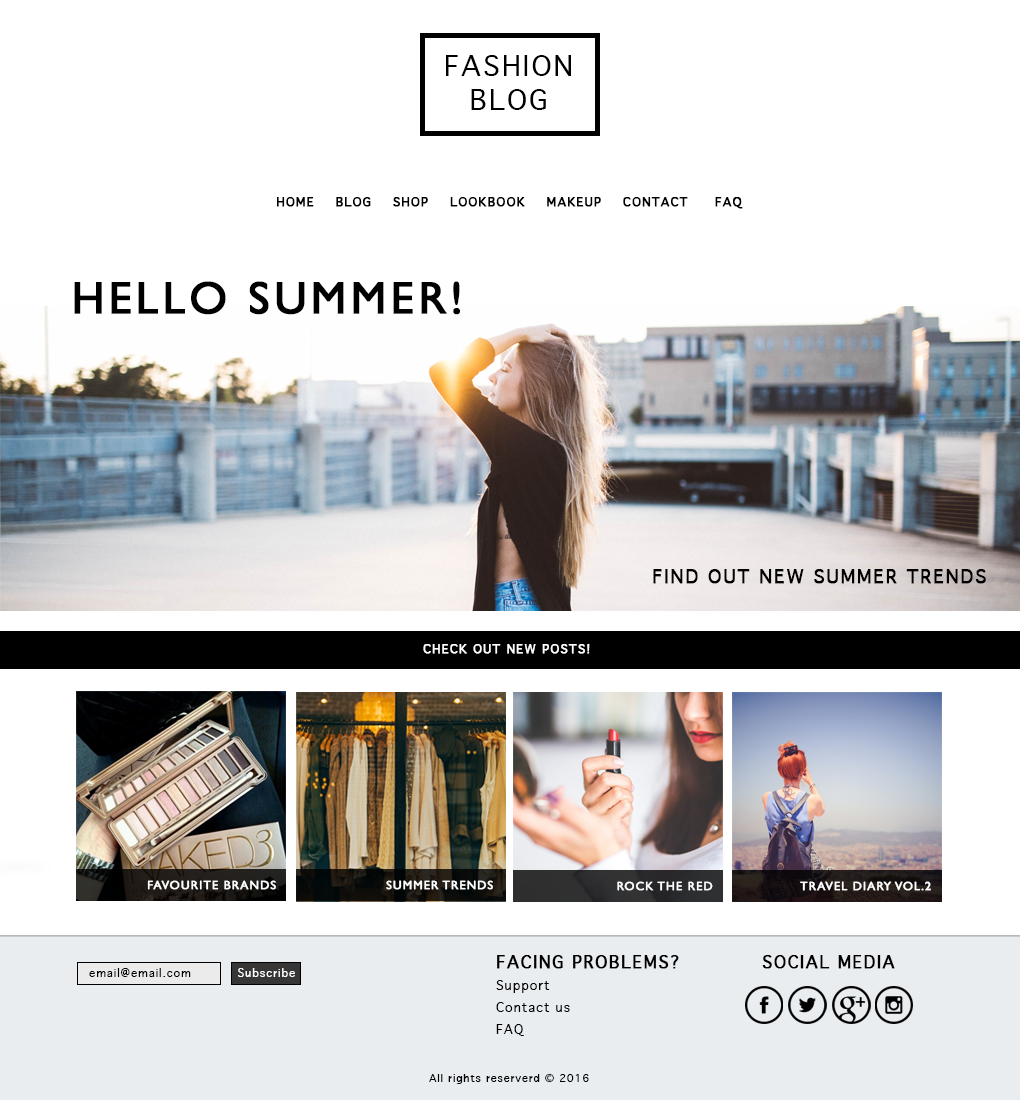
<style>
.page{position:relative;width:1020px;height:1100px;background:#ffffff}
.page>*{position:absolute;margin:0}
.t1{font:26.9px/34.8px "Geneva";letter-spacing:0.075em;color:#000000;text-transform:uppercase}
.t2{font:12px "Geneva";letter-spacing:0.075em;color:#000000;text-transform:uppercase;font-weight:bold}
.t3{font:45.5px "GillSans";letter-spacing:0.075em;color:#000000;text-transform:uppercase;font-weight:bold}
.t4{font:18.1px "Geneva";letter-spacing:0.075em;color:#000000;text-transform:uppercase;font-weight:bold}
.t5{font:12px "Geneva";letter-spacing:0.075em;color:#ffffff;text-transform:uppercase;font-weight:bold}
.t6{font:12.1px "GillSans";letter-spacing:0.075em;color:#ffffff;text-transform:uppercase;font-weight:bold}
.t7{font:12.5px/22.1px "Geneva";letter-spacing:0.075em;color:#000000}
.t8{font:16.5px/27.1px "Geneva";letter-spacing:0.075em;color:#000000;text-transform:uppercase;font-weight:bold}
.t9{font:16px "Geneva";letter-spacing:0.075em;color:#000000;text-transform:uppercase;font-weight:bold}
.t10{font:11px "Geneva";letter-spacing:0.075em;color:#000000}
.t11{font:11px "Geneva";letter-spacing:0.075em;color:#ffffff}
.t12{font:10px "Geneva";letter-spacing:0.075em;color:#000000;scale:1.04 1}
</style>
<div class="page">
<p class="t1" style="left:446px;top:55px;width:125px;height:55px;text-align:center">Fashion<br>Blog</p>
<p class="t2" style="left:277px;top:197px;width:466px;height:12px">Home    Blog    shop    Lookbook    MAkeup    Contact     FAQ</p>
<p class="t3" style="left:74px;top:281px;width:386px;height:34px">Hello summer!</p>
<p class="t4" style="left:653px;top:569px;width:333px;height:15px">Find out new summer trends</p>
<p class="t5" style="left:423px;top:644px;width:167px;height:10px">Check out new posts!</p>
<p class="t6" style="left:147px;top:880px;width:129px;height:10px">Favourite Brands</p>
<p class="t6" style="left:386px;top:880px;width:107px;height:10px">summer trends</p>
<p class="t6" style="left:617px;top:881px;width:96px;height:10px">rock the red</p>
<p class="t6" style="left:800px;top:881px;width:131px;height:10px">Travel diary vol.2</p>
<p class="t7" style="left:496px;top:955px;width:183px;height:81px"><span class="t8">Facing problems?<br></span>Support<br>Contact us<br>FAQ</p>
<p class="t9" style="left:762px;top:955px;width:133px;height:14px">Social Media</p>
<p class="t10" style="left:89px;top:968px;width:102px;height:9px">email@email.com</p>
<p class="t11" style="left:238px;top:968px;width:57px;height:9px">Subscribe</p>
<p class="t12" style="left:429px;top:1073px;width:160px;height:11px">All rights reserverd © 2016</p>
</div>
